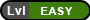
<style>
.page{position:relative;width:90px;height:20px;background:#3c7c0d}
.page>*{position:absolute;margin:0}
.t1{font:12px "Arial-BoldMT";letter-spacing:0.055em;color:#ffffff}
.t2{font:11px "Arial-BoldMT";letter-spacing:0.055em;color:#ffffff}
</style>
<div class="page">
<p class="t1" style="left:7px;top:6px;width:18px;height:9px">Lvl</p>
<p class="t2" style="left:41px;top:7px;width:32px;height:8px">EASY</p>
</div>
